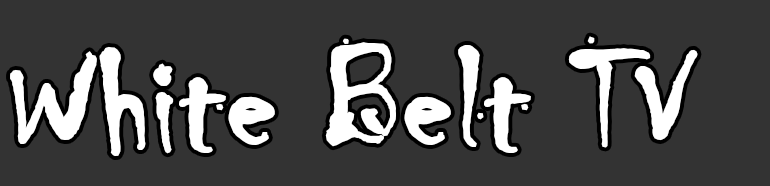
<style>
.page{position:relative;width:770px;height:186px;background:#333333}
.page>*{position:absolute;margin:0}
.t1{font:146.7px "Chiller-Regular";color:#ffffff;font-weight:bold}
</style>
<div class="page">
<p class="t1" style="left:10px;top:36px;width:688px;height:121px">White Belt TV</p>
</div>
